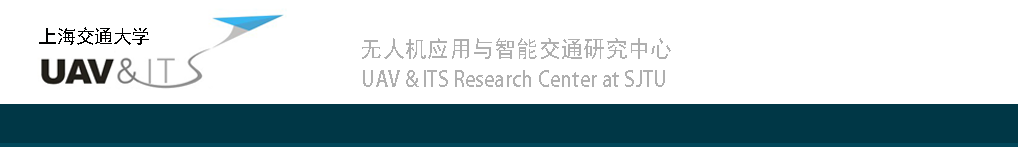
<style>
.page{position:relative;width:1018px;height:147px;background:#ffffff}
.page>*{position:absolute;margin:0}
.t1{font:19.5px "SimHei";color:#000101;scale:0.95 1}
.t2{font:23.1px "SimHei";color:#afafaf;scale:0.95 1}
.t3{font:21.2px "AdobeHeitiStd-Regular";color:#afafaf;scale:0.95 1}
</style>
<div class="page">
<p class="t1" style="left:39px;top:27px;width:110px;height:18px">上海交通大学</p>
<p class="t2" style="left:362px;top:38px;width:309px;height:21px">无人机应用与智能交通研究中心</p>
<p class="t3" style="left:363px;top:70px;width:302px;height:17px">UAV &amp; ITS Research Center at SJTU</p>
</div>
